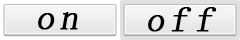
<style>
.page{position:relative;width:240px;height:40px}
.page>*{position:absolute;margin:0}
.t1{font:36px "SimSun";letter-spacing:0.16em;color:#000000;font-weight:bold;font-style:italic}
</style>
<div class="page">
<p class="t1" style="left:38px;top:12px;width:40px;height:18px">on</p>
<p class="t1" style="left:148px;top:7px;width:69px;height:25px">off</p>
</div>
